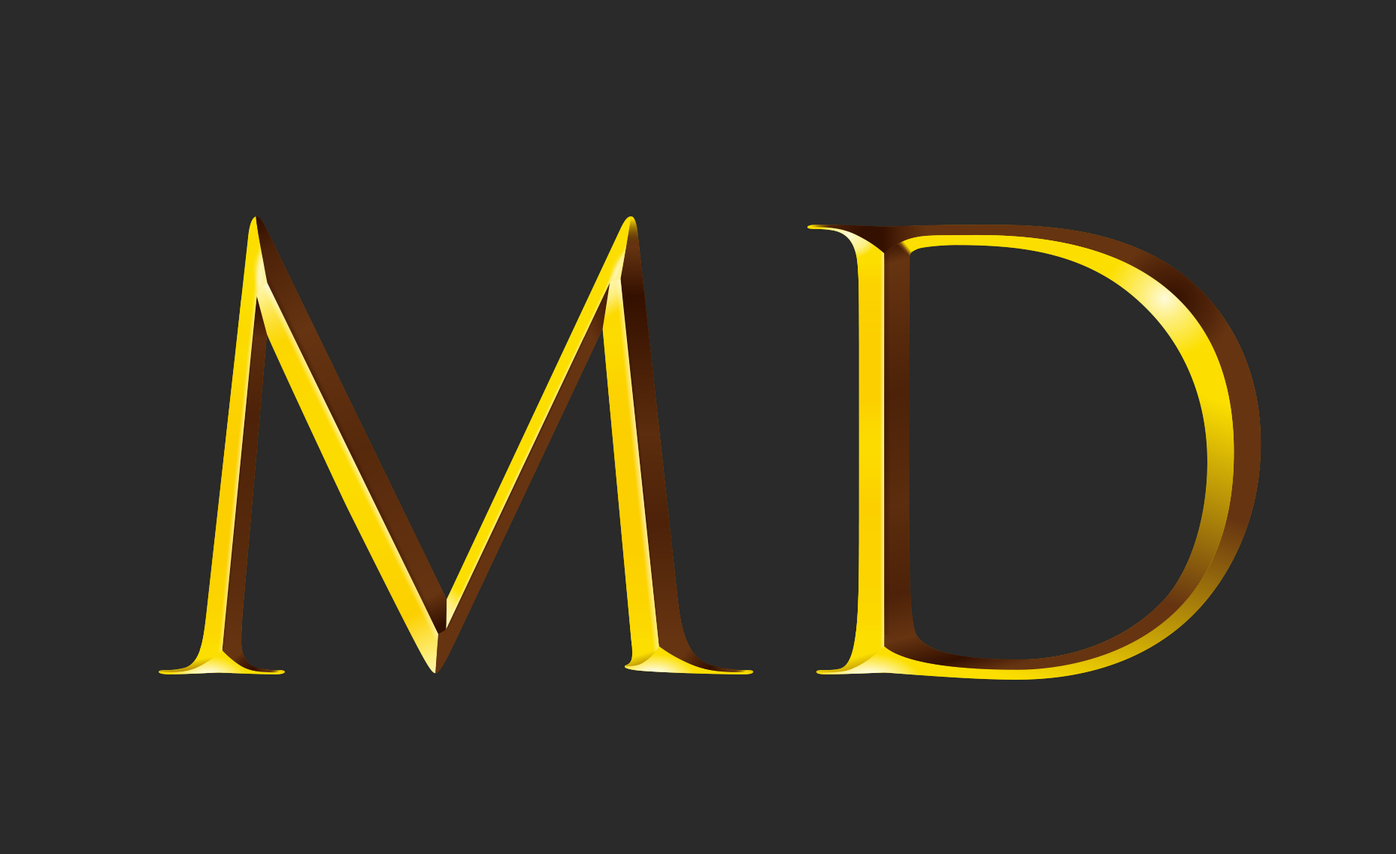
<style>
.page{position:relative;width:1396px;height:854px;background:#292a29}
.page>*{position:absolute;margin:0}
.t1{font:594.9px "TrajanColor-Concept"}
</style>
<div class="page">
<p class="t1" style="left:159px;top:216px;width:1102px;height:464px">MD</p>
</div>
